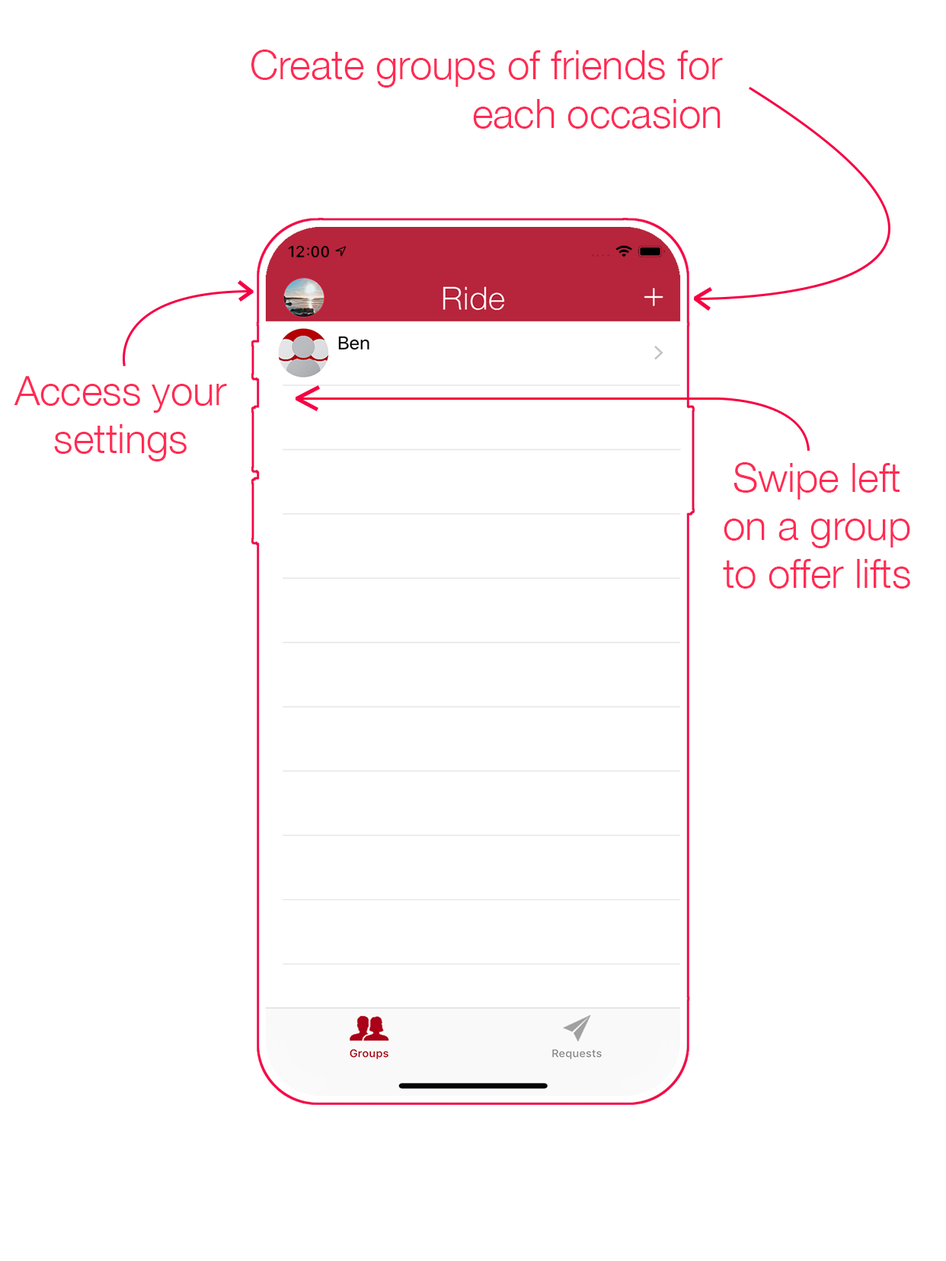
<style>
.page{position:relative;width:946px;height:1261px;background:#ffffff}
.page>*{position:absolute;margin:0}
.t1{font:40.1px "HelveticaNeue-Light";color:#ff2b54}
.t2{font:16px "HelveticaNeue-Medium";letter-spacing:0.06em;color:#000000}
</style>
<div class="page">
<p class="t1" style="left:251px;top:49px;width:472px;height:80px;text-align:right">Create groups of friends for each occasion</p>
<p class="t2" style="left:311px;top:246px;width:18px;height:11px">00</p>
<p class="t1" style="left:14px;top:376px;width:213px;height:85px;text-align:center">Access your settings</p>
<p class="t1" style="left:723px;top:462px;width:187px;height:127px;text-align:center">Swipe left on a group to offer lifts</p>
</div>
